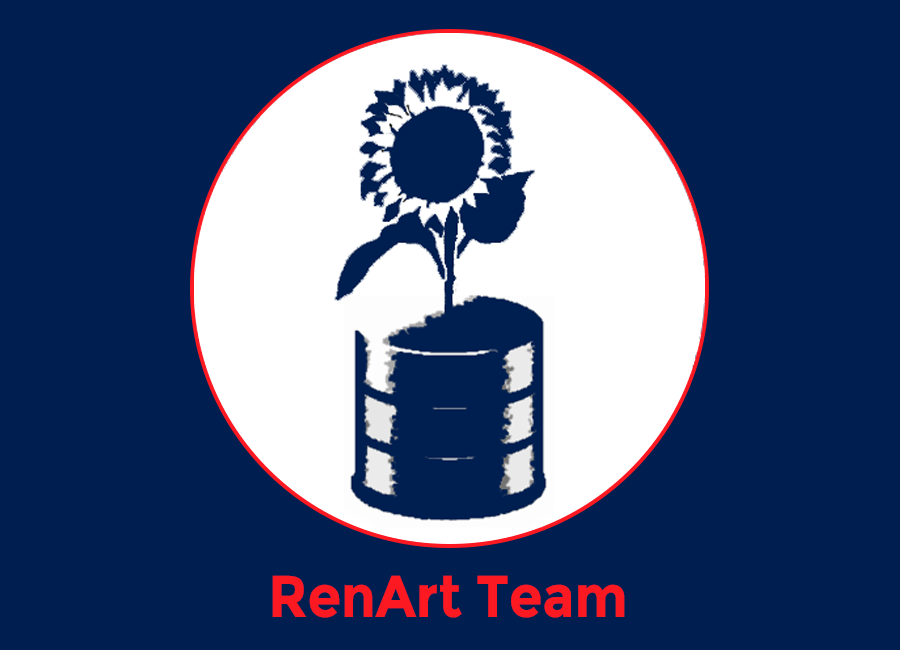
<style>
.page{position:relative;width:900px;height:650px;background:#001f50}
.page>*{position:absolute;margin:0}
.t1{font:58.8px "Montserrat-Bold";color:#fc1922;scale:0.92 1}
</style>
<div class="page">
<p class="t1" style="left:272px;top:575px;width:353px;height:43px">RenArt Team</p>
</div>
